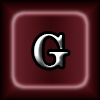
<style>
.page{position:relative;width:100px;height:100px}
.page>*{position:absolute;margin:0}
.t1{font:47px "EngraversMT";font-weight:bold;scale:0.77 1}
</style>
<div class="page">
<p class="t1" style="left:34px;top:34px;width:34px;height:34px">G</p>
</div>
